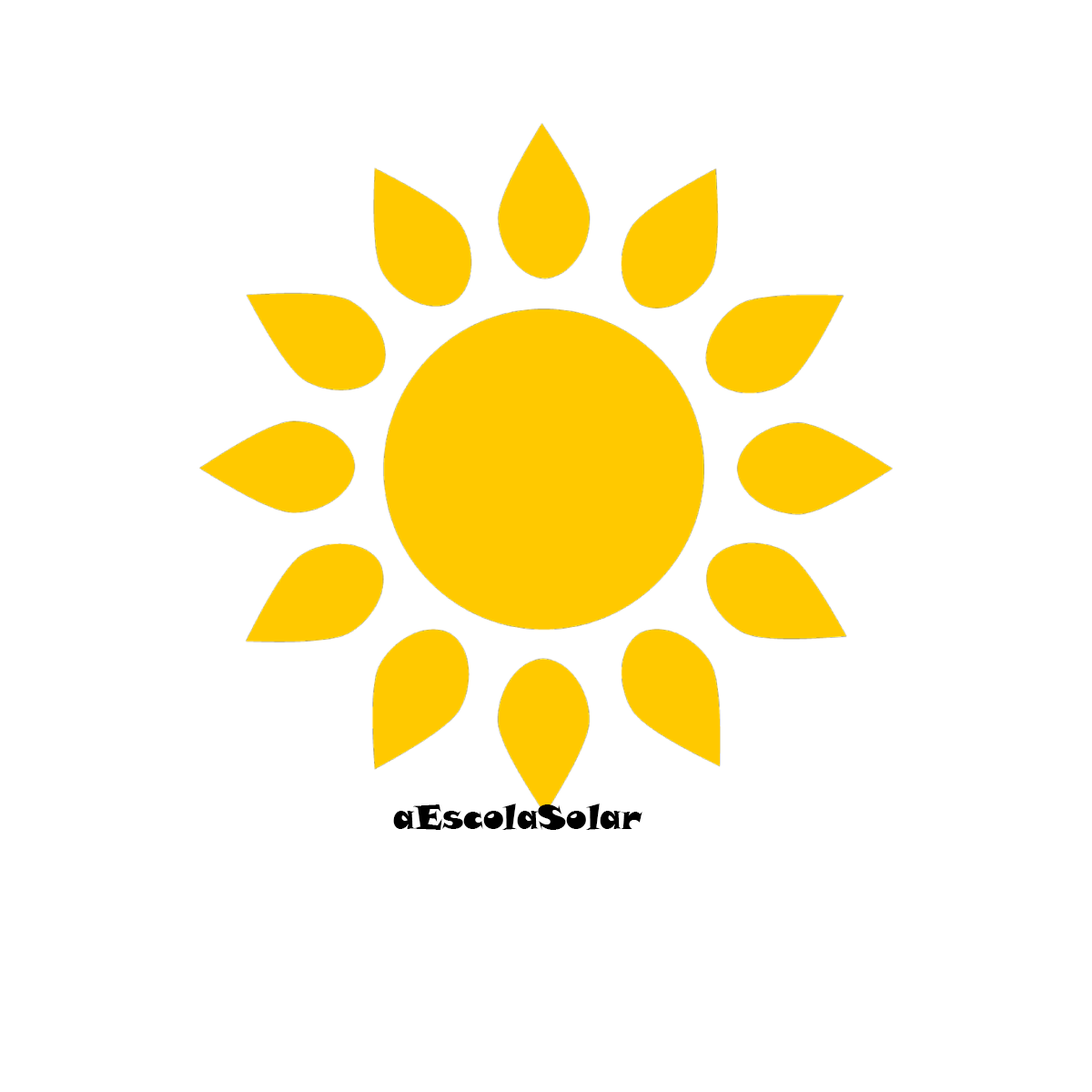
<style>
.page{position:relative;width:1092px;height:1092px;background:#ffffff}
.page>*{position:absolute;margin:0}
.t1{font:34.1px "SnapITC-Regular";color:#000000}
</style>
<div class="page">
<p class="t1" style="left:393px;top:804px;width:249px;height:26px">aEscolaSolar</p>
</div>
